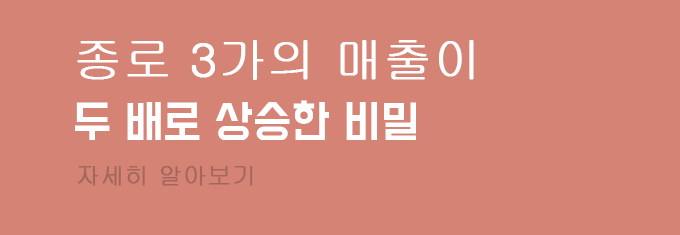
<style>
.page{position:relative;width:680px;height:235px;background:#d58375}
.page>*{position:absolute;margin:0}
.t1{font:40px/56px "BMDoHyeon";color:#ffffff}
.t2{font:48px/56px "Gulim";color:#ffffff;font-weight:bold}
.t3{font:24px "Gulim";color:#a4675b;font-weight:bold}
</style>
<div class="page">
<p class="t1" style="left:75px;top:40px;width:399px;height:100px"><span class="t2">종로 3가의 매출이<br></span>두 배로 상승한 비밀</p>
<p class="t3" style="left:78px;top:166px;width:175px;height:20px">자세히 알아보기</p>
</div>
